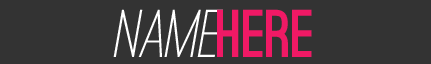
<style>
.page{position:relative;width:431px;height:64px;background:#333333}
.page>*{position:absolute;margin:0}
.t1{font:70px "OstrichSans-Medium";letter-spacing:-0.01em;color:#ffffff;font-style:italic}
.t2{font:64px "OstrichSans-Black";letter-spacing:-0.01em;color:#f01965}
</style>
<div class="page">
<p class="t1" style="left:113px;top:9px;width:199px;height:48px">name<span class="t2">here</span></p>
</div>
